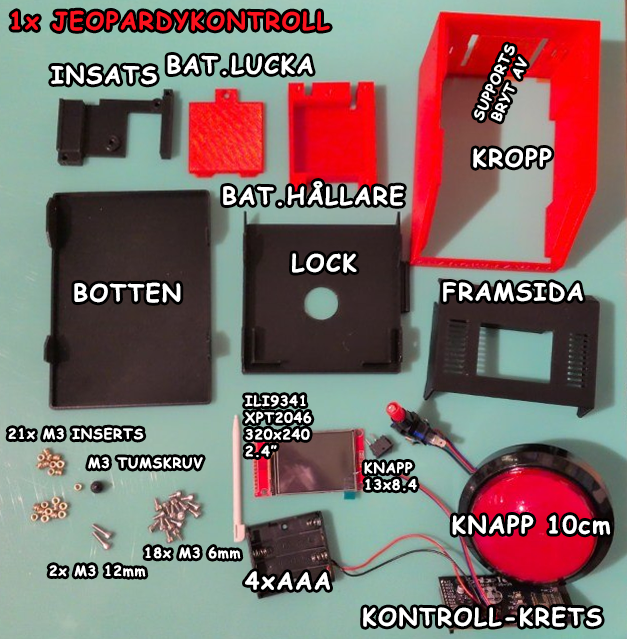
<style>
.page{position:relative;width:627px;height:639px}
.page>*{position:absolute;margin:0}
.t1{font:23.7px "ComicSansMS-Bold";letter-spacing:0.06em;color:#fb131e}
.t2{font:14.2px "ComicSansMS-Bold";letter-spacing:0.06em;color:#ffffff}
.t3{font:23.7px "ComicSansMS-Bold";letter-spacing:0.06em;color:#ffffff}
.t4{font:14px "ComicSansMS-Bold";letter-spacing:0.06em;color:#ffffff}
</style>
<div class="page">
<p class="t1" style="left:11px;top:10px;width:319px;height:21px">1x JEOPARDYKONTROLL</p>
<p class="t2" style="left:474px;top:44px;width:53px;height:78px;text-align:center;rotate:-65deg">SUPPORTS<br>BRYT AV</p>
<p class="t3" style="left:51px;top:65px;width:106px;height:20px">INSATS</p>
<p class="t3" style="left:167px;top:55px;width:146px;height:20px">BAT.LUCKA</p>
<p class="t3" style="left:473px;top:148px;width:79px;height:20px">KROPP</p>
<p class="t3" style="left:223px;top:181px;width:181px;height:25px">BAT.HÅLLARE</p>
<p class="t3" style="left:292px;top:253px;width:65px;height:20px">LOCK</p>
<p class="t3" style="left:74px;top:282px;width:107px;height:21px">BOTTEN</p>
<p class="t3" style="left:443px;top:282px;width:140px;height:20px">FRAMSIDA</p>
<p class="t4" style="left:245px;top:395px;width:67px;height:63px">ILI9341<br>XPT2046<br>320x240<br>2.4”</p>
<p class="t4" style="left:8px;top:427px;width:136px;height:13px">21x M3 INSERTS</p>
<p class="t4" style="left:88px;top:457px;width:115px;height:12px">M3 TUMSKRUV</p>
<p class="t4" style="left:364px;top:462px;width:53px;height:29px">KNAPP <br>13x8.4</p>
<p class="t3" style="left:452px;top:515px;width:159px;height:20px">KNAPP 10cm</p>
<p class="t4" style="left:145px;top:547px;width:96px;height:12px">18x M3 6mm</p>
<p class="t4" style="left:49px;top:565px;width:97px;height:12px">2x M3 12mm</p>
<p class="t3" style="left:245px;top:571px;width:85px;height:19px">4xAAA</p>
<p class="t3" style="left:363px;top:606px;width:239px;height:21px">KONTROLL-KRETS</p>
</div>
